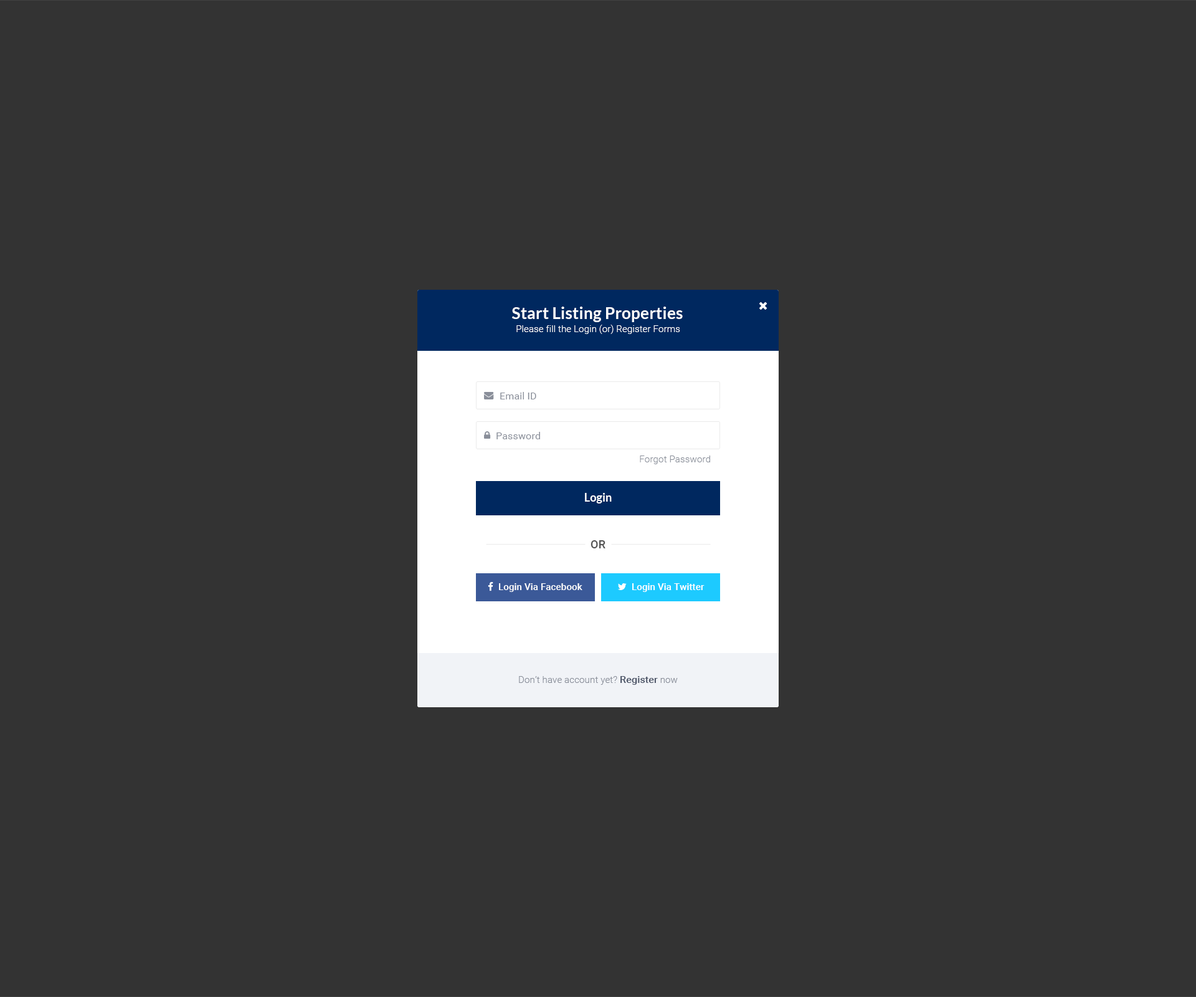
<style>
.page{position:relative;width:1196px;height:997px;background:#333333}
.page>*{position:absolute;margin:0}
.t1{font:16.2px "Lato-Bold";letter-spacing:0.01em;color:#ffffff}
.t2{font:9.3px "Roboto-Light";letter-spacing:0.01em;color:#ffffff}
.t3{font:10px "Roboto-Regular";letter-spacing:0.01em;color:#8a8f9a}
.t4{font:9.3px "Roboto-Light";letter-spacing:0.01em;color:#8a8f9a}
.t5{font:11.2px "Lato-Bold";letter-spacing:0.01em;color:#ffffff}
.t6{font:11.2px "Roboto-Medium";letter-spacing:0.01em;color:#555555;text-transform:uppercase}
.t7{font:9.3px "Roboto-Medium";letter-spacing:0.01em;color:#ffffff}
.t8{font:10px "Roboto-Medium";letter-spacing:0.01em;color:#4d5567}
</style>
<div class="page">
<p class="t1" style="left:512px;top:307px;width:171px;height:15px">Start Listing Properties</p>
<p class="t2" style="left:516px;top:325px;width:164px;height:9px">Please fill the Login (or) Register Forms</p>
<p class="t3" style="left:500px;top:392px;width:36px;height:7px">Email ID</p>
<p class="t3" style="left:497px;top:432px;width:43px;height:7px">Password</p>
<p class="t4" style="left:640px;top:455px;width:70px;height:9px">Forgot Password</p>
<p class="t5" style="left:585px;top:493px;width:27px;height:10px">Login</p>
<p class="t6" style="left:591px;top:540px;width:15px;height:8px">or</p>
<p class="t7" style="left:499px;top:583px;width:84px;height:9px">Login Via Facebook</p>
<p class="t7" style="left:632px;top:583px;width:73px;height:9px">Login Via Twitter</p>
<p class="t4" style="left:519px;top:676px;width:159px;height:9px">Don’t have account yet? <span class="t8">Register</span> now</p>
</div>
